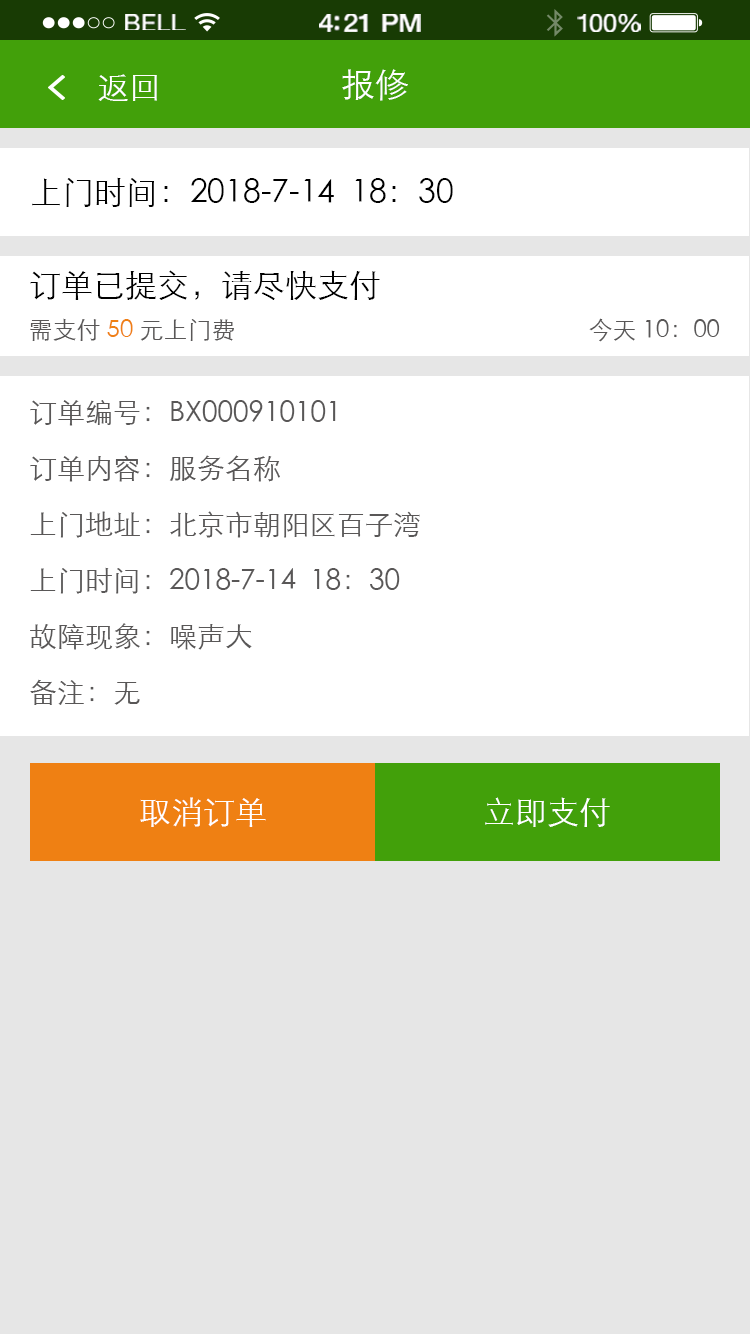
<style>
.page{position:relative;width:750px;height:1334px;background:#e6e6e6}
.page>*{position:absolute;margin:0}
.t1{font:23.3px "HelveticaNeue";letter-spacing:0.02em;color:#ffffff;scale:1.06 1}
.t2{font:25.3px "HelveticaNeue-Medium";letter-spacing:-0.02em;color:#ffffff;scale:1.06 1}
.t3{font:24.3px "HelveticaNeue";letter-spacing:-0.02em;color:#ffffff;scale:1.06 1}
.t4{font:32px "STXihei";color:#ffffff}
.t5{font:34px "STXihei";color:#ffffff}
.t6{font:32px "STXihei";color:#000000}
.t7{font:24px "STXihei";color:#595757}
.t8{font:24px "STXihei";color:#ef8013}
.t9{font:28px/56px "STXihei";color:#595757}
</style>
<div class="page">
<p class="t1" style="left:125px;top:14px;width:61px;height:16px">BELL</p>
<p class="t2" style="left:319px;top:14px;width:102px;height:18px">4:21 PM</p>
<p class="t3" style="left:577px;top:14px;width:64px;height:18px">100%</p>
<p class="t4" style="left:98px;top:74px;width:59px;height:27px">返回</p>
<p class="t5" style="left:342px;top:69px;width:66px;height:32px">报修</p>
<p class="t6" style="left:32px;top:177px;width:421px;height:30px">上门时间：2018-7-14  18：30</p>
<p class="t6" style="left:30px;top:270px;width:350px;height:30px">订单已提交，请尽快支付</p>
<p class="t7" style="left:30px;top:318px;width:204px;height:23px">需支付 <span class="t8">50</span> 元上门费</p>
<p class="t7" style="left:589px;top:318px;width:131px;height:24px">今天 10：00</p>
<p class="t9" style="left:30px;top:400px;width:390px;height:305px">订单编号：BX000910101<br>订单内容：服务名称<br>上门地址：北京市朝阳区百子湾<br>上门时间：2018-7-14  18：30<br>故障现象：噪声大<br>备注：无</p>
<p class="t4" style="left:140px;top:797px;width:126px;height:30px">取消订单</p>
<p class="t4" style="left:485px;top:797px;width:125px;height:30px">立即支付</p>
</div>
